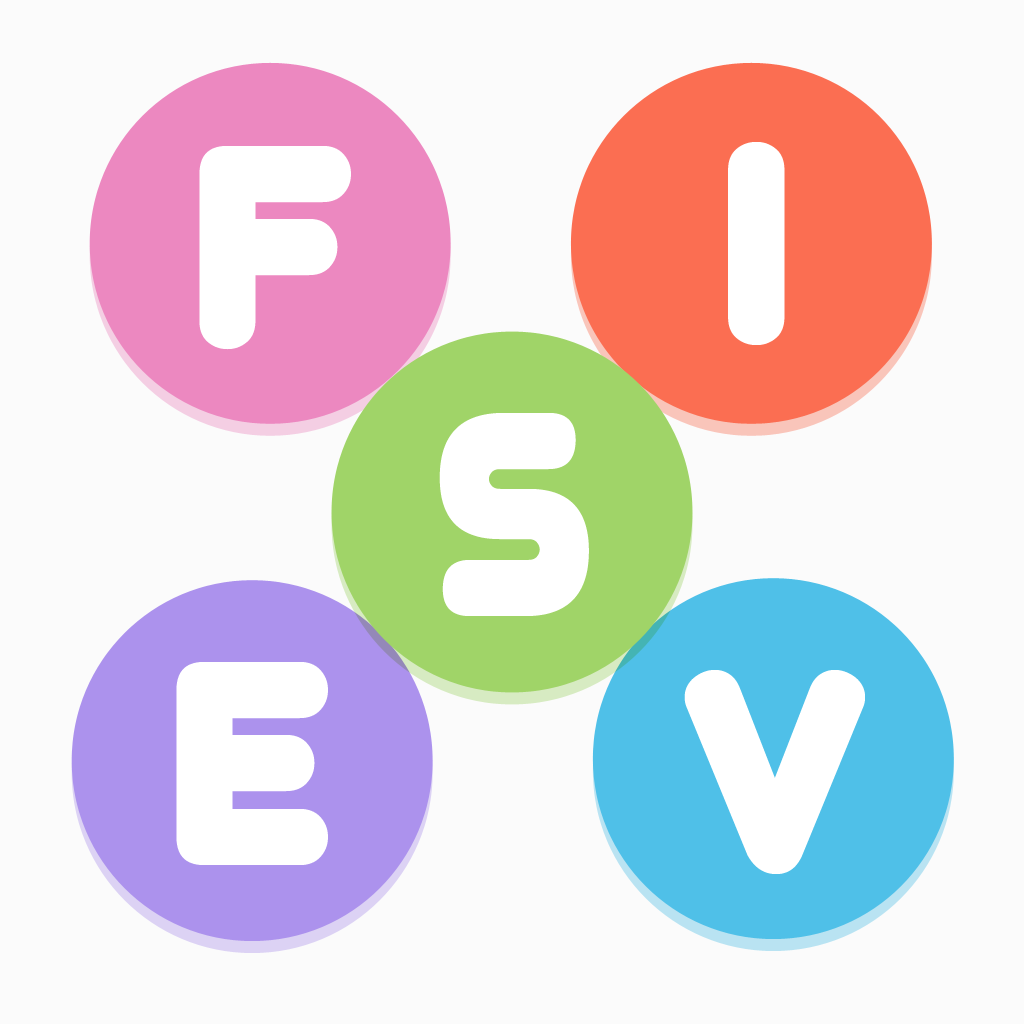
<style>
.page{position:relative;width:1024px;height:1024px;background:#fbfbfb}
.page>*{position:absolute;margin:0}
.t1{font:340px "Junegull";color:#ffffff}
</style>
<div class="page">
<p class="t1" style="left:199px;top:146px;width:152px;height:204px">f</p>
<p class="t1" style="left:728px;top:142px;width:57px;height:203px">i</p>
<p class="t1" style="left:439px;top:413px;width:150px;height:203px">s</p>
<p class="t1" style="left:176px;top:662px;width:152px;height:203px">e</p>
<p class="t1" style="left:684px;top:670px;width:181px;height:204px">v</p>
</div>
